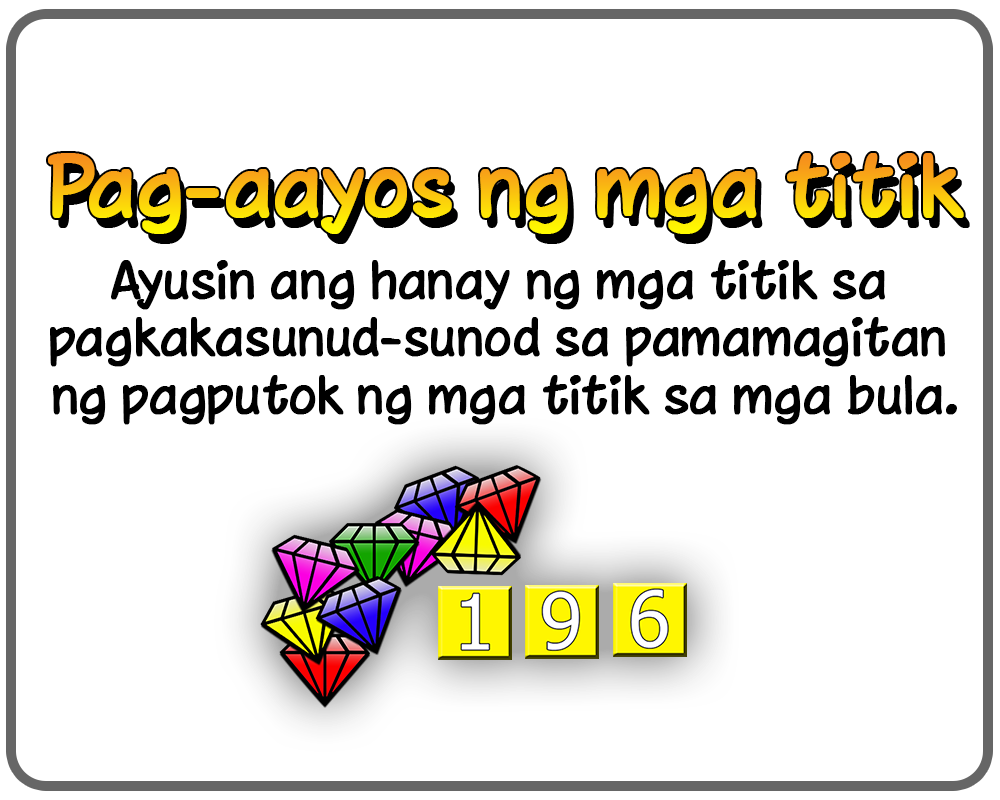
<style>
.page{position:relative;width:1000px;height:800px;background:#ffffff}
.page>*{position:absolute;margin:0}
.t1{font:80px "Chinacat";font-weight:bold}
.t2{font:48px "Chinacat";color:#000000;font-weight:bold}
</style>
<div class="page">
<p class="t1" style="left:48px;top:153px;width:916px;height:81px">Pag-aayos ng mga titik</p>
<p class="t2" style="left:50px;top:260px;width:907px;height:165px;text-align:center">Ayusin ang hanay ng mga titik sa <br>pagkakasunud-sunod sa pamamagitan <br>ng pagputok ng mga titik sa mga bula.</p>
</div>
